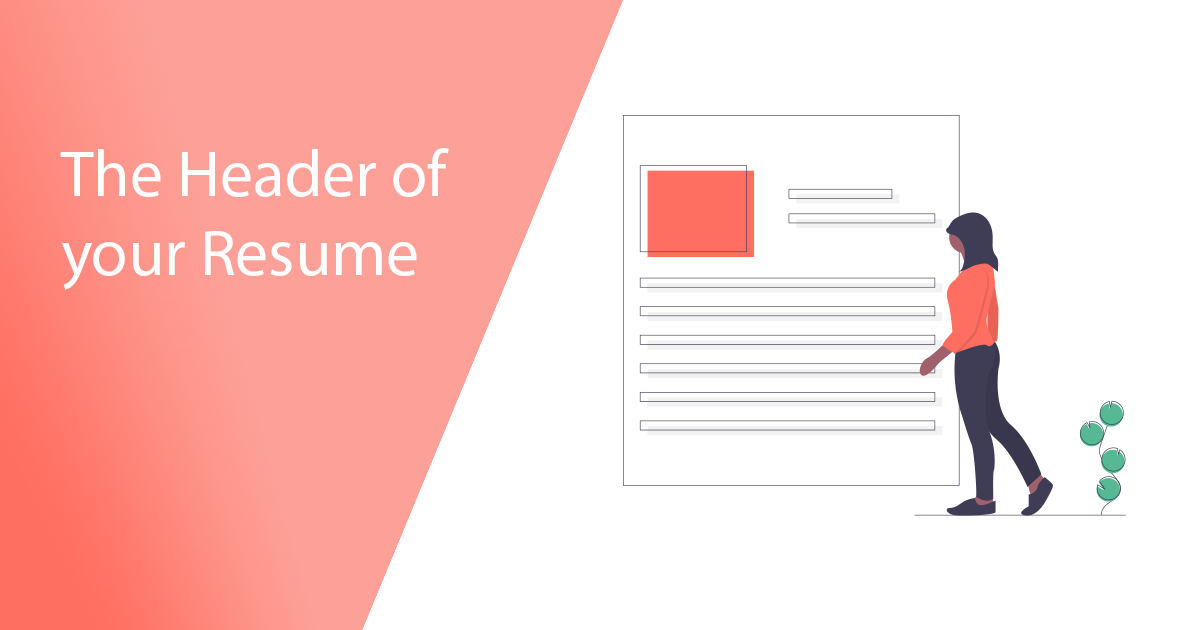
<style>
.page{position:relative;width:1200px;height:630px;background:#ffffff}
.page>*{position:absolute;margin:0}
.t1{font:66px "MyriadPro-Regular";color:#ffffff}
</style>
<div class="page">
<p class="t1" style="left:60px;top:148px;width:389px;height:142px">The Header of<br>your Resume</p>
</div>
